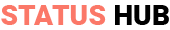
<style>
.page{position:relative;width:170px;height:30px;background:#ffffff}
.page>*{position:absolute;margin:0}
.t1{font:28.3px "Roboto-Black";color:#fb7868}
.t2{font:28.3px "Roboto-Black";color:#000000}
</style>
<div class="page">
<p class="t1" style="left:1px;top:5px;width:168px;height:20px">STATUS<span class="t2"> HUB</span></p>
</div>
